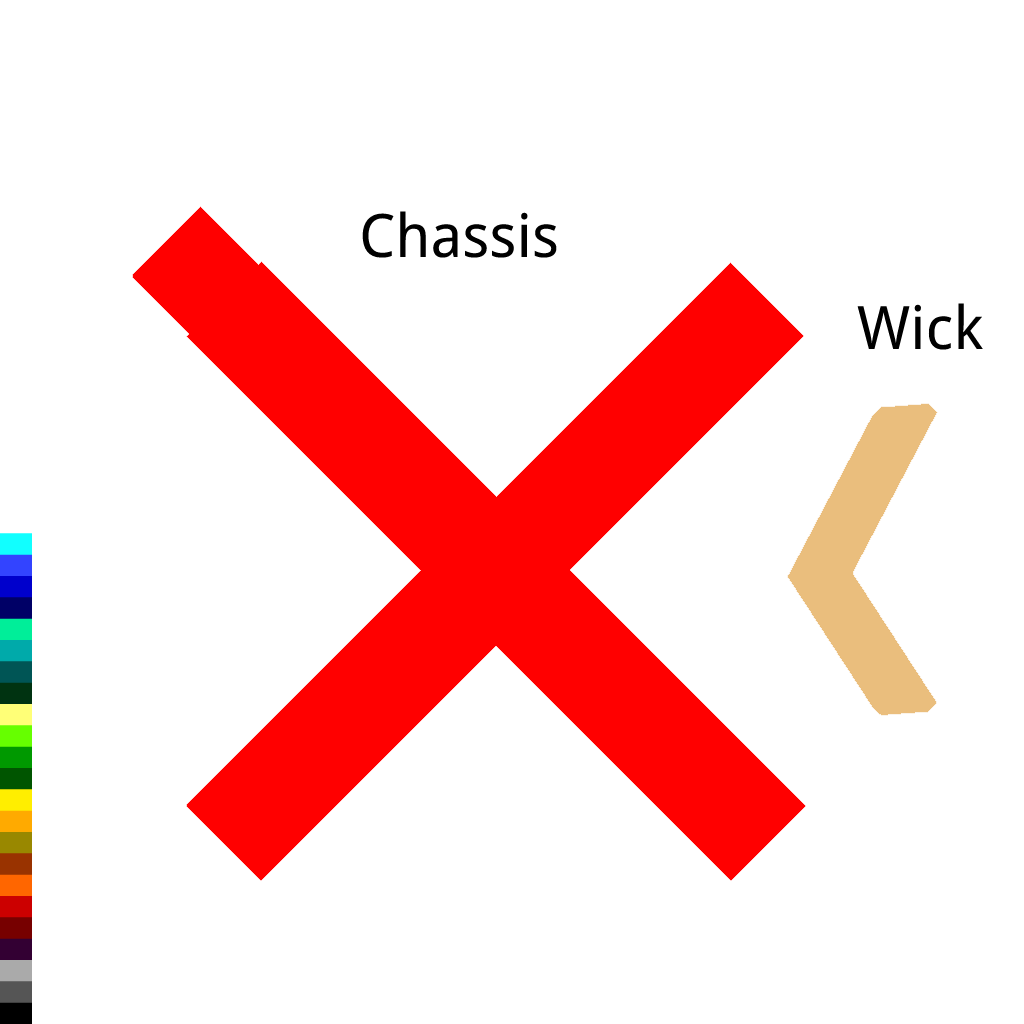
<style>
.page{position:relative;width:1024px;height:1024px;background:#ffffff}
.page>*{position:absolute;margin:0}
.t1{font:60px "DroidSans";color:#000000}
</style>
<div class="page">
<p class="t1" style="left:362px;top:211px;width:195px;height:47px">Chassis</p>
<p class="t1" style="left:857px;top:303px;width:126px;height:47px">Wick</p>
</div>
